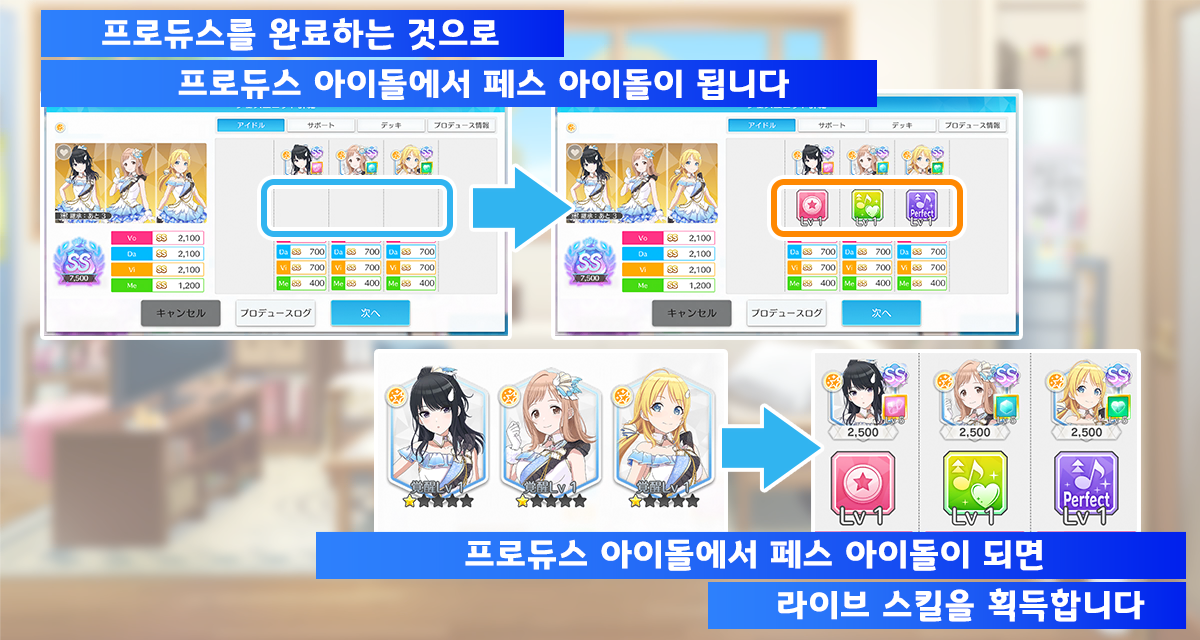
<style>
.page{position:relative;width:1200px;height:640px}
.page>*{position:absolute;margin:0}
.t1{font:34.7px "GyeonggiTitleB";letter-spacing:0.05em;color:#ffffff}
</style>
<div class="page">
<p class="t1" style="left:102px;top:17px;width:397px;height:34px">프로듀스를 완료하는 것으로</p>
<p class="t1" style="left:178px;top:69px;width:611px;height:31px">프로듀스 아이돌에서 페스 아이돌이 됩니다</p>
<p class="t1" style="left:465px;top:539px;width:578px;height:32px">프로듀스 아이돌에서 페스 아이돌이 되면</p>
<p class="t1" style="left:778px;top:588px;width:367px;height:34px">라이브 스킬을 획득합니다</p>
</div>
